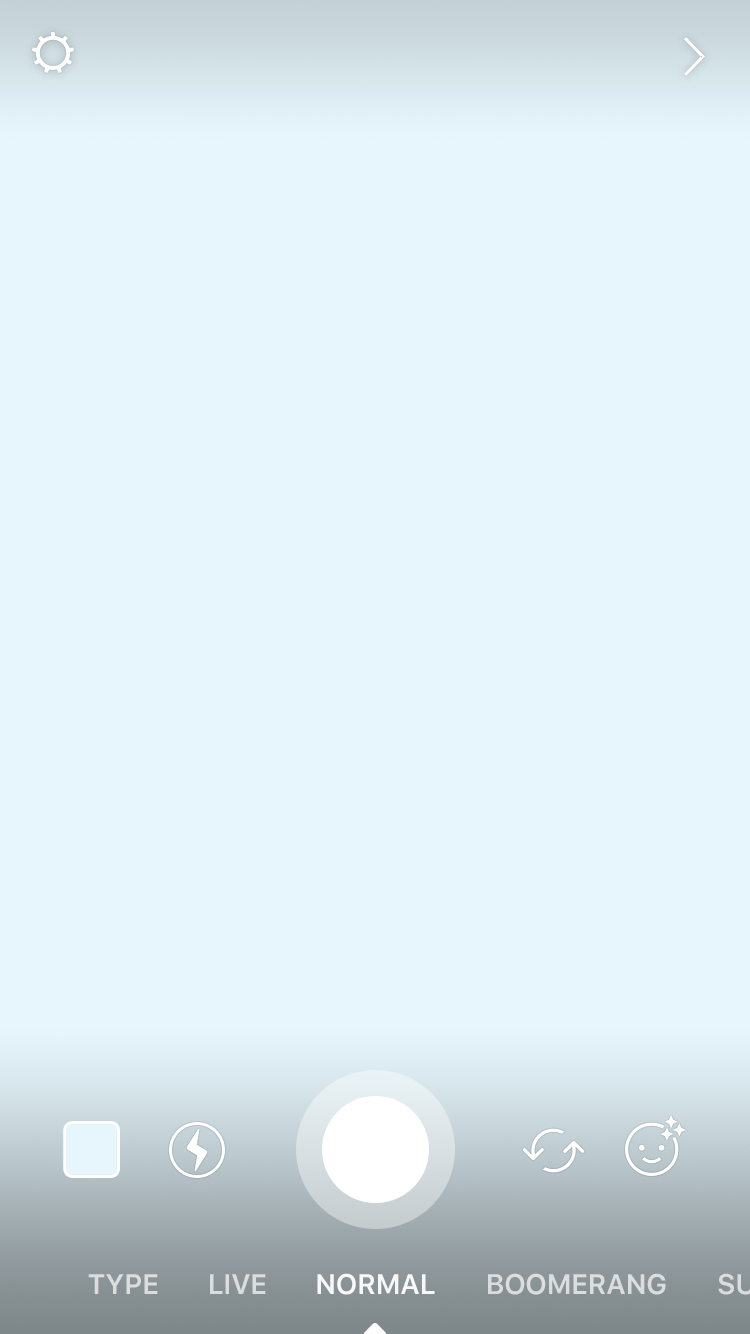
<style>
.page{position:relative;width:750px;height:1334px;background:#e6f6fc}
.page>*{position:absolute;margin:0}
.t1{font:28px "SFUIText-Semibold";letter-spacing:-0.02em;color:#dbddde}
.t2{font:28px "SFUIText-Semibold";letter-spacing:-0.02em;color:#f8f8f8}
</style>
<div class="page">
<p class="t1" style="left:88px;top:1274px;width:70px;height:20px">TYPE</p>
<p class="t1" style="left:210px;top:1274px;width:56px;height:20px">LIVE</p>
<p class="t2" style="left:317px;top:1273px;width:118px;height:22px">NORMAL</p>
<p class="t1" style="left:488px;top:1273px;width:178px;height:22px">BOOMERANG</p>
</div>
